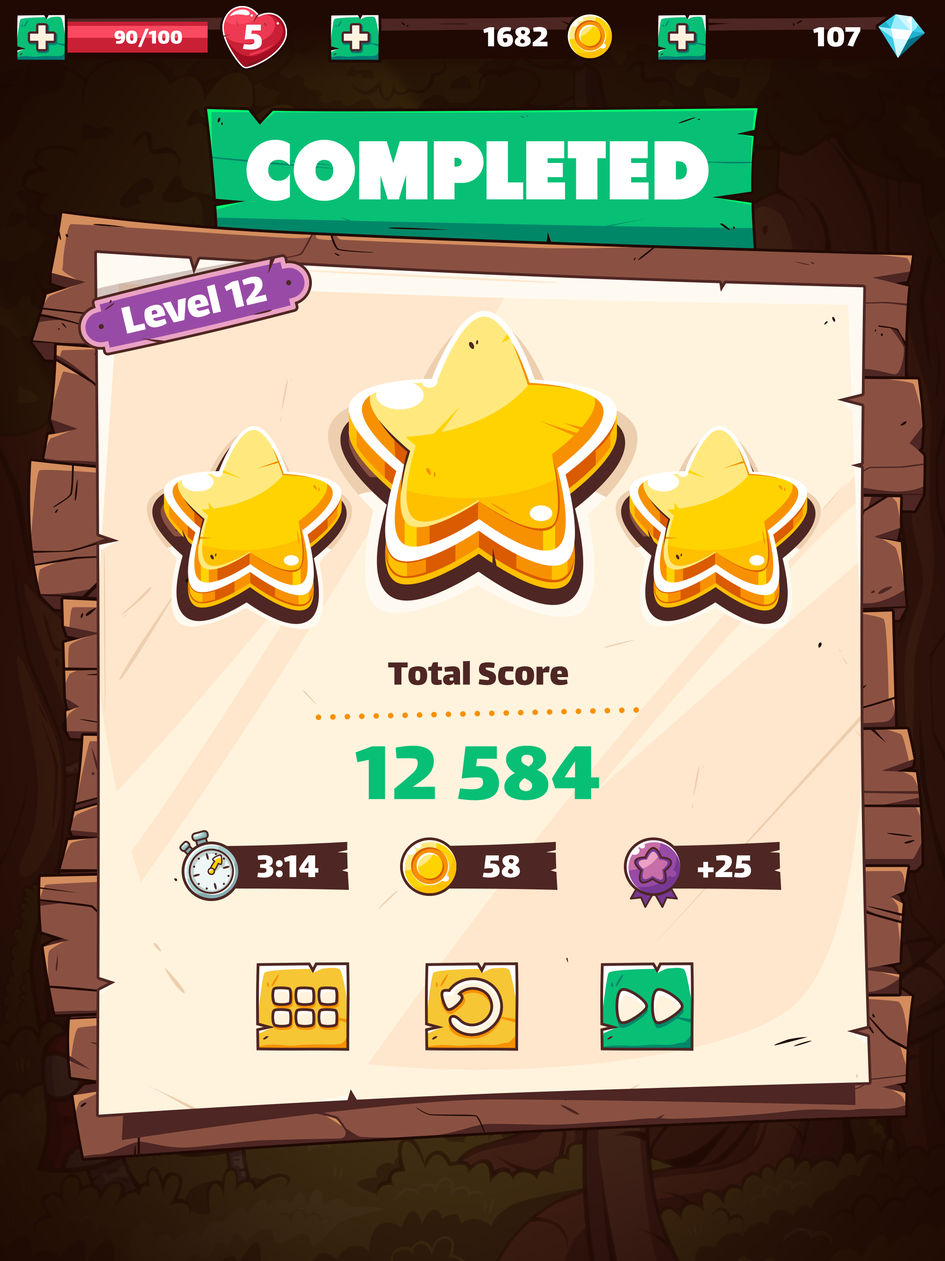
<style>
.page{position:relative;width:945px;height:1261px}
.page>*{position:absolute;margin:0}
.t1{font:57.2px "Lalezar-Regular";color:#fff3dd}
.t2{font:22.2px "Lalezar-Regular";color:#ffffff}
.t3{font:42.5px "Lalezar-Regular";color:#ffffff}
.t4{font:33.2px "Lalezar-Regular";color:#ffffff}
.t5{font:83.1px "Tondu-Beta";color:#ffffff;text-transform:uppercase}
.t6{font:46.2px "Lalezar-Regular";color:#ffffff}
.t7{font:38.8px "Lalezar-Regular";color:#4e2623}
.t8{font:92.3px "Lalezar-Regular";color:#08bf76}
.t9{font:92.3px "Lalezar-Regular";letter-spacing:0.2em;color:#08bf76}
.t10{font:37.9px "Lalezar-Regular";color:#ffffff}
</style>
<div class="page">
<p class="t1" style="left:30px;top:25px;width:24px;height:24px">+</p>
<p class="t2" style="left:114px;top:29px;width:68px;height:18px">90/100</p>
<p class="t3" style="left:243px;top:24px;width:19px;height:26px">5</p>
<p class="t1" style="left:344px;top:25px;width:24px;height:24px">+</p>
<p class="t4" style="left:483px;top:27px;width:65px;height:20px">1682</p>
<p class="t1" style="left:670px;top:25px;width:24px;height:24px">+</p>
<p class="t4" style="left:813px;top:27px;width:48px;height:20px">107</p>
<p class="t5" style="left:247px;top:140px;width:462px;height:61px">completed</p>
<p class="t6" style="left:121px;top:277px;width:146px;height:57px;rotate:-13deg">Level 12</p>
<p class="t7" style="left:388px;top:661px;width:180px;height:25px">Total Score</p>
<p class="t8" style="left:355px;top:746px;width:245px;height:54px">1<span class="t9">2</span>584</p>
<p class="t10" style="left:257px;top:855px;width:62px;height:23px">3:14</p>
<p class="t10" style="left:483px;top:855px;width:37px;height:23px">58</p>
<p class="t10" style="left:698px;top:855px;width:54px;height:23px">+25</p>
</div>
